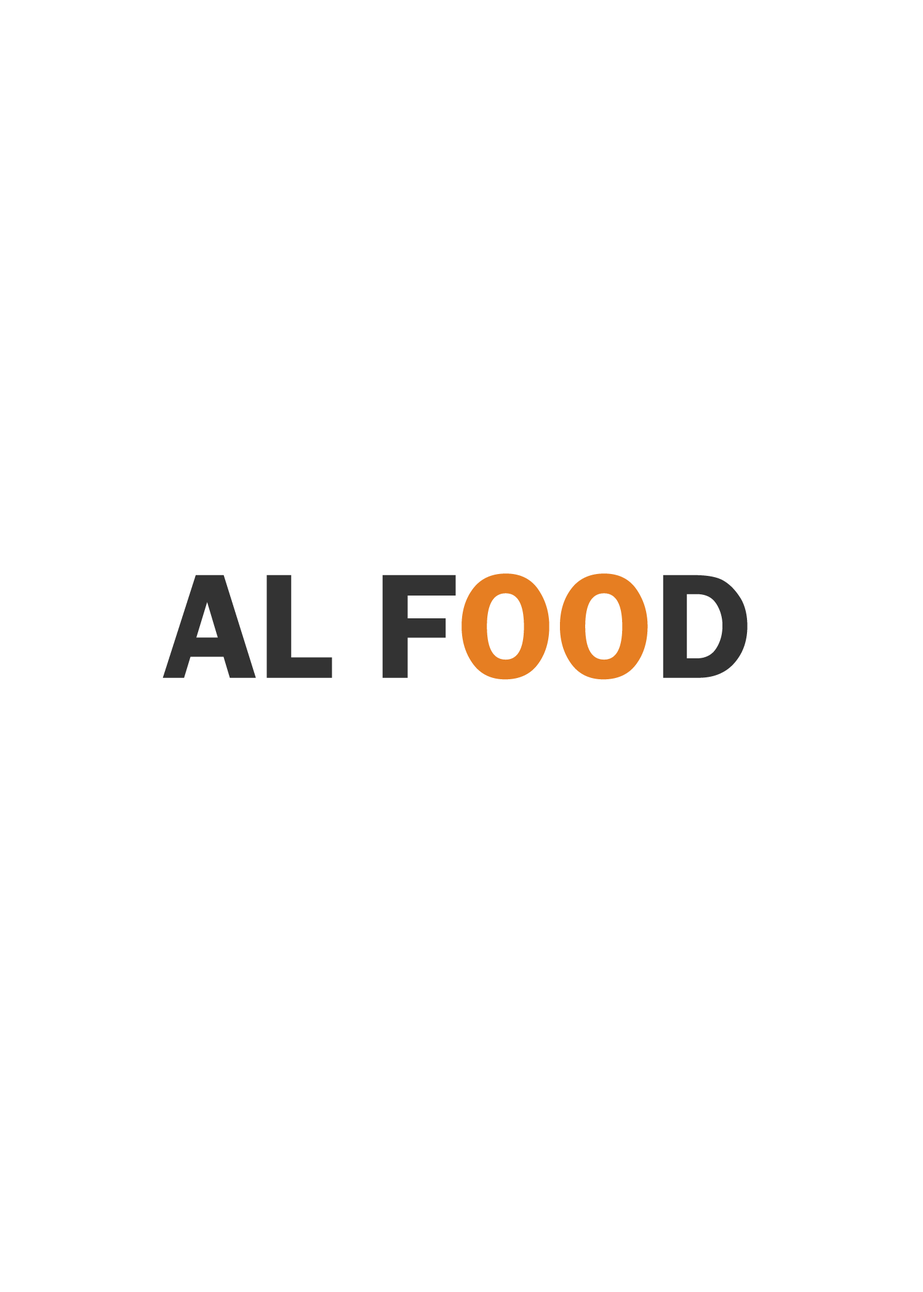
<style>
.page{position:relative;width:923px;height:1292px;background:#ffffff}
.page>*{position:absolute;margin:0}
.t1{font:153.8px "FranklinGothic-Demi";color:#333333;text-transform:uppercase}
.t2{font:153.8px "FranklinGothic-Demi";color:#e67e22;text-transform:uppercase}
</style>
<div class="page">
<p class="t1" style="left:162px;top:573px;width:586px;height:107px">AL F<span class="t2">OO</span>D</p>
</div>
